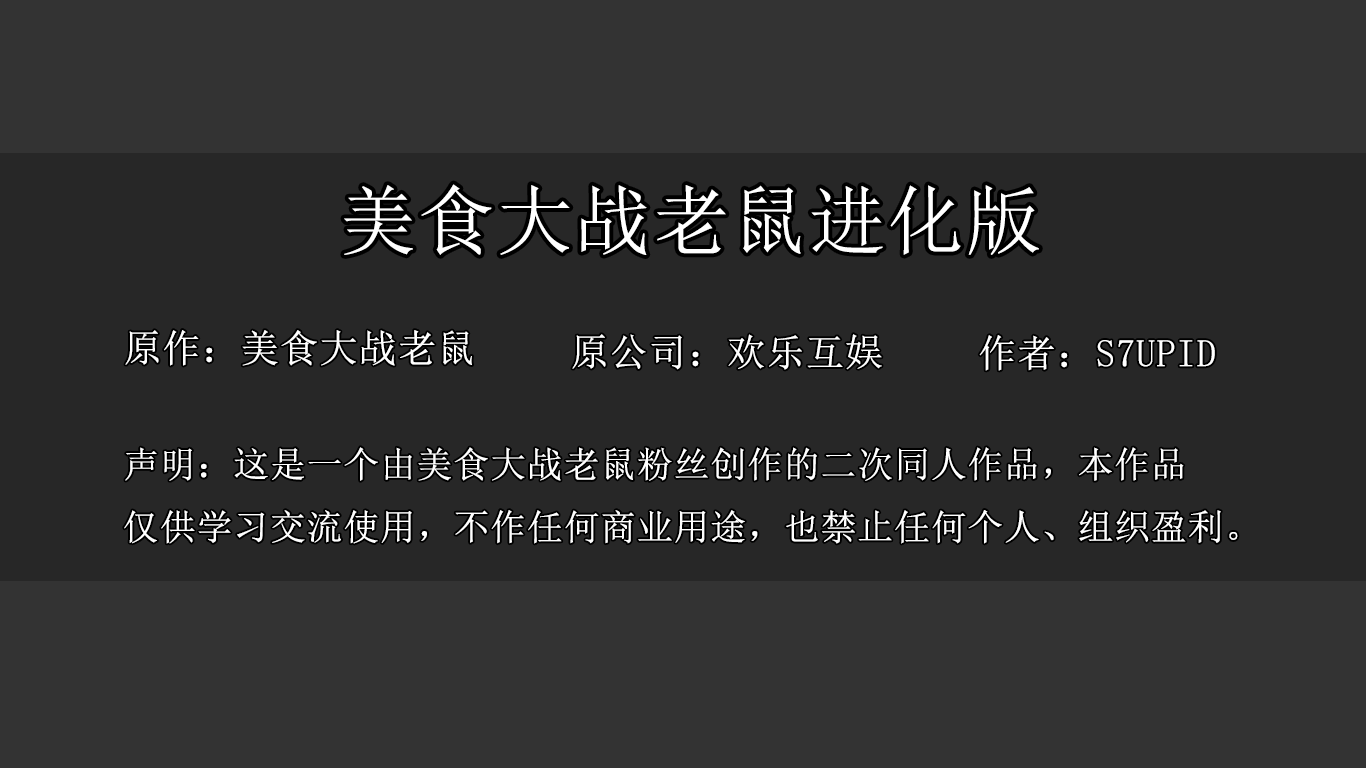
<style>
.page{position:relative;width:1366px;height:768px;background:#272727}
.page>*{position:absolute;margin:0}
.t1{font:76.1px "SimSun";color:#ffffff;font-weight:bold}
.t2{font:38.2px "SimSun";color:#ffffff;font-weight:bold}
.t3{font:35.7px "SimSun";color:#ffffff;font-weight:bold}
</style>
<div class="page">
<p class="t1" style="left:344px;top:184px;width:695px;height:71px">美食大战老鼠进化版</p>
<p class="t2" style="left:125px;top:330px;width:347px;height:36px">原作：美食大战老鼠</p>
<p class="t2" style="left:572px;top:334px;width:310px;height:36px">原公司：欢乐互娱</p>
<p class="t2" style="left:979px;top:335px;width:236px;height:36px">作者：S7UPID</p>
<p class="t3" style="left:124px;top:447px;width:1114px;height:97px">声明：这是一个由美食大战老鼠粉丝创作的二次同人作品，本作品<br>仅供学习交流使用，不作任何商业用途，也禁止任何个人、组织盈利。</p>
</div>
